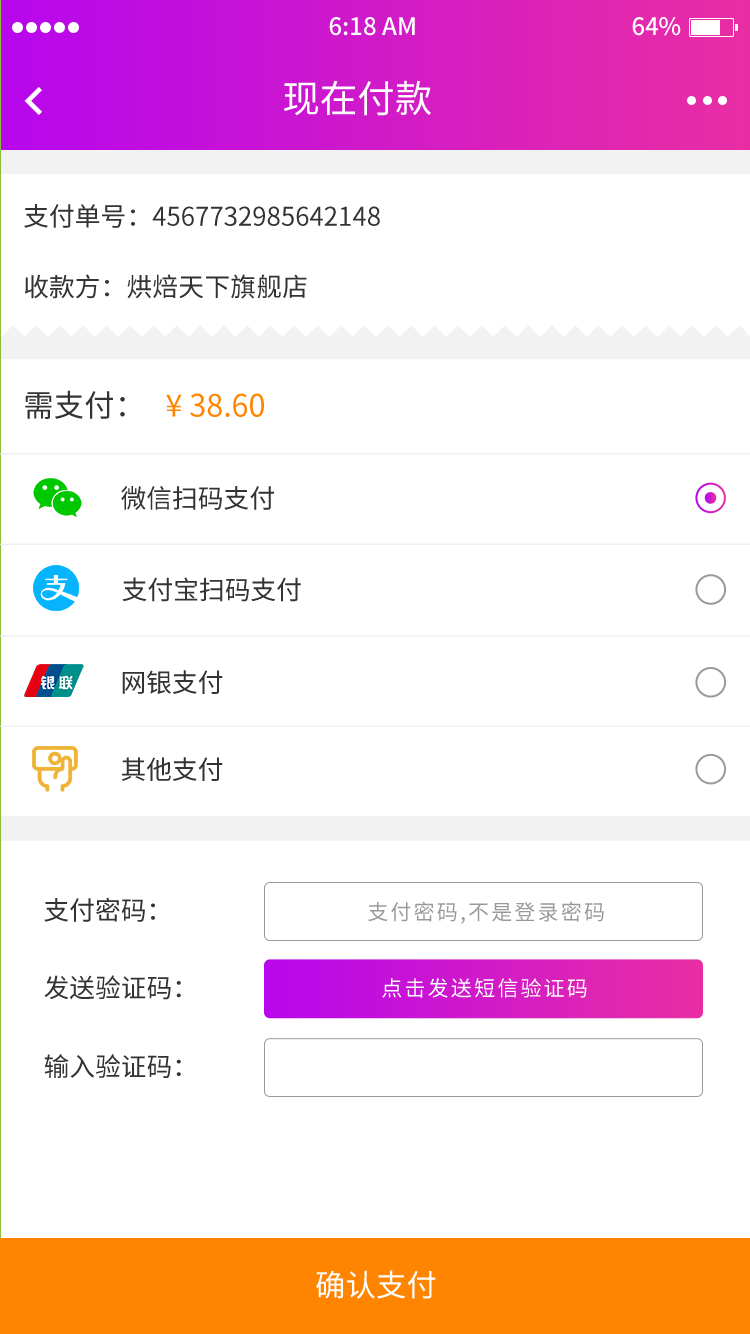
<style>
.page{position:relative;width:750px;height:1334px;background:#ffffff}
.page>*{position:absolute;margin:0}
.t1{font:37.6px "NotoSansHans-Regular";color:#ffffff}
.t2{font:25.8px "NotoSansHans-Regular";color:#333333}
.t3{font:25.8px "NotoSansHans-Regular";letter-spacing:0.008em;color:#333333}
.t4{font:30.5px "NotoSansHans-Regular";color:#ff8501}
.t5{font:30.5px "NotoSansHans-Regular";color:#333333}
.t6{font:21.1px "NotoSansHans-Regular";letter-spacing:0.1em;color:#999999}
.t7{font:21.1px "NotoSansHans-Regular";letter-spacing:0.1em;color:#ffffff}
.t8{font:30.5px "NotoSansHans-Regular";color:#ffffff}
</style>
<div class="page">
<p class="t1" style="left:284px;top:80px;width:147px;height:36px">现在付款</p>
<p class="t2" style="left:24px;top:204px;width:356px;height:24px">支付单号：4567732985642148</p>
<p class="t3" style="left:24px;top:274px;width:283px;height:25px"><span class="t2">收款方：</span>烘焙天下旗舰店</p>
<p class="t4" style="left:25px;top:390px;width:239px;height:29px"><span class="t5">需支付：   </span>¥ 38.60</p>
<p class="t2" style="left:121px;top:486px;width:153px;height:24px">微信扫码支付</p>
<p class="t2" style="left:122px;top:577px;width:179px;height:25px">支付宝扫码支付</p>
<p class="t2" style="left:122px;top:670px;width:101px;height:24px">网银支付</p>
<p class="t2" style="left:121px;top:757px;width:102px;height:24px">其他支付</p>
<p class="t2" style="left:44px;top:897px;width:111px;height:25px">支付密码：</p>
<p class="t6" style="left:368px;top:901px;width:236px;height:23px">支付密码,不是登录密码</p>
<p class="t2" style="left:44px;top:975px;width:137px;height:25px">发送验证码：</p>
<p class="t7" style="left:382px;top:978px;width:205px;height:20px">点击发送短信验证码</p>
<p class="t2" style="left:44px;top:1054px;width:137px;height:24px">输入验证码：</p>
<p class="t8" style="left:316px;top:1270px;width:120px;height:29px">确认支付</p>
</div>
